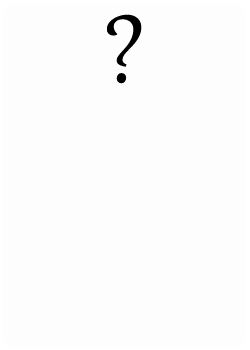
<style>
.page{position:relative;width:250px;height:350px;background:#fdfdfd}
.page>*{position:absolute;margin:0}
.t1{font:116.7px "Gabriola";color:#000000}
</style>
<div class="page">
<p class="t1" style="left:107px;top:14px;width:35px;height:70px">?</p>
</div>
